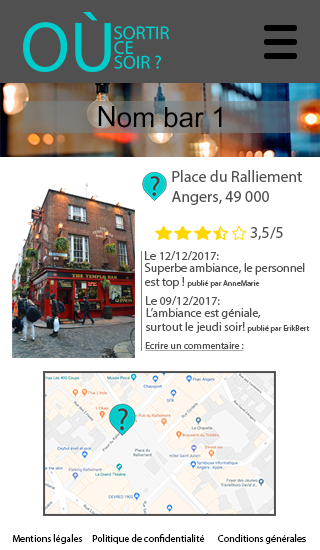
<style>
.page{position:relative;width:320px;height:550px;background:#ffffff}
.page>*{position:absolute;margin:0}
.t1{font:27.9px "ArialMT";color:#000000}
.t2{font:16px "MyriadPro-Regular";color:#515050}
.t3{font:12px "MyriadPro-Regular";color:#515050}
.t4{font:8px "MyriadPro-Regular";color:#515050}
.t5{font:10px "MyriadPro-Regular";color:#515050;text-decoration:underline}
.t6{font:10px "MyriadPro-Regular";color:#000000}
</style>
<div class="page">
<p class="t1" style="left:98px;top:106px;width:124px;height:22px">Nom bar 1</p>
<p class="t2" style="left:171px;top:170px;width:131px;height:35px">Place du Ralliement<br>Angers, 49 000</p>
<p class="t2" style="left:250px;top:227px;width:33px;height:13px">3,5/5</p>
<p class="t3" style="left:145px;top:251px;width:74px;height:9px">Le 12/12/2017:</p>
<p class="t3" style="left:144px;top:263px;width:161px;height:26px">Superbe ambiance, le personnel<br>est top ! <span class="t4">publié par AnneMarie</span></p>
<p class="t3" style="left:146px;top:296px;width:74px;height:9px">Le 09/12/2017:</p>
<p class="t3" style="left:145px;top:308px;width:165px;height:25px">L’ambiance est géniale, <br>surtout le jeudi soir! <span class="t4">publié par ErikBert</span></p>
<p class="t5" style="left:145px;top:342px;width:99px;height:9px">Ecrire un commentaire :</p>
<p class="t6" style="left:12px;top:534px;width:71px;height:10px">Mentions légales</p>
<p class="t6" style="left:92px;top:534px;width:113px;height:10px">Politique de confidentialité</p>
<p class="t6" style="left:218px;top:534px;width:88px;height:10px">Conditions générales</p>
</div>
